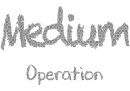
<style>
.page{position:relative;width:130px;height:91px;background:#ffffff}
.page>*{position:absolute;margin:0}
.t1{font:20px/56px "DJBChalkItUp";color:#acabac}
.t2{font:46px/56px "Chalkduster";letter-spacing:-0.1em;color:#acabac;scale:0.75 1}
</style>
<div class="page">
<p class="t1" style="left:0px;top:6px;width:130px;height:79px;text-align:center"><span class="t2">Medium<br></span>Operation</p>
</div>
